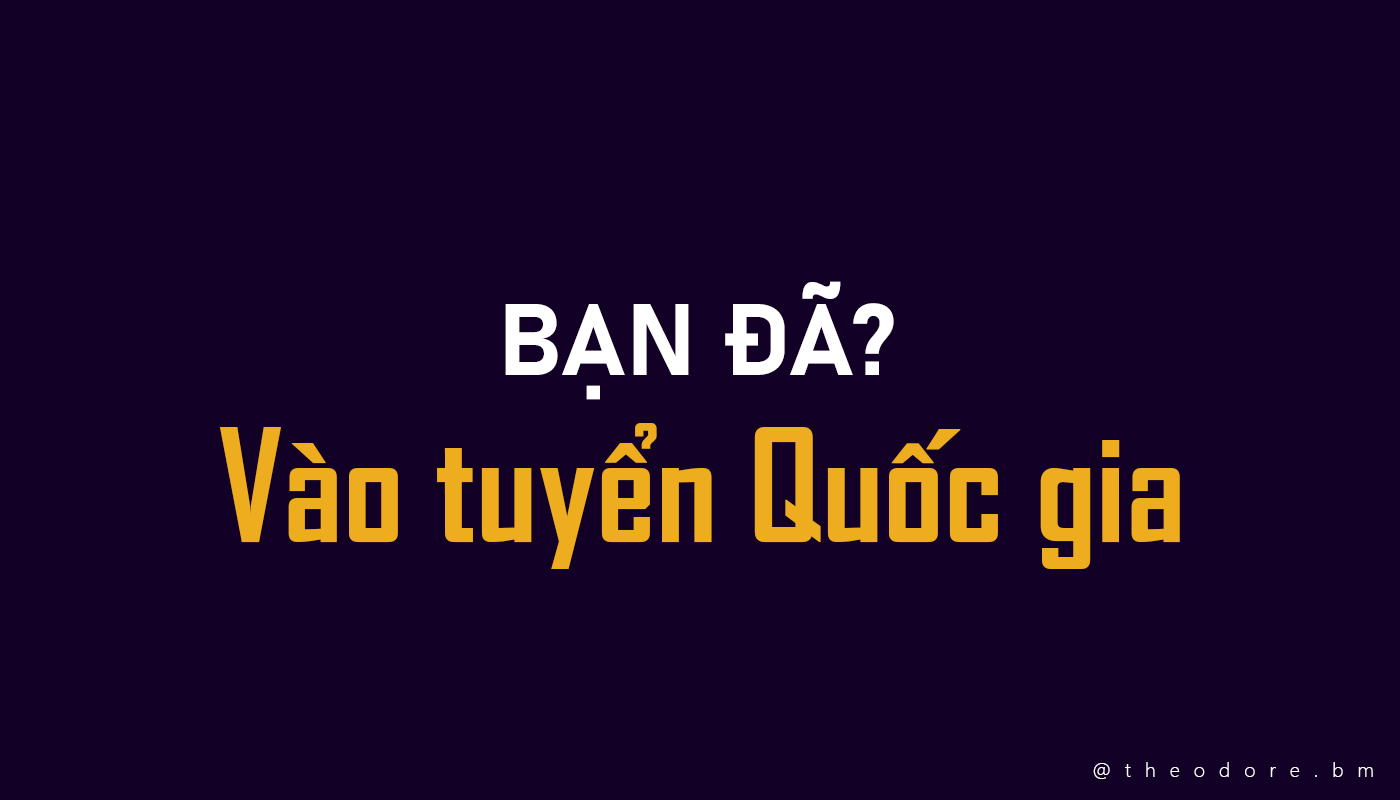
<style>
.page{position:relative;width:1400px;height:800px;background:#120026}
.page>*{position:absolute;margin:0}
.t1{font:100px "Bahnschrift-Bold";color:#ffffff}
.t2{font:150px "SVN-AgencyFBbold";color:#eead1f}
.t3{font:20px "SegoeUI-Light";letter-spacing:0.7em;color:#ffffff}
</style>
<div class="page">
<p class="t1" style="left:505px;top:281px;width:389px;height:119px">BẠN ĐÃ?</p>
<p class="t2" style="left:220px;top:423px;width:960px;height:146px">Vào tuyển Quốc gia</p>
<p class="t3" style="left:1093px;top:762px;width:280px;height:17px">@theodore.bm</p>
</div>
